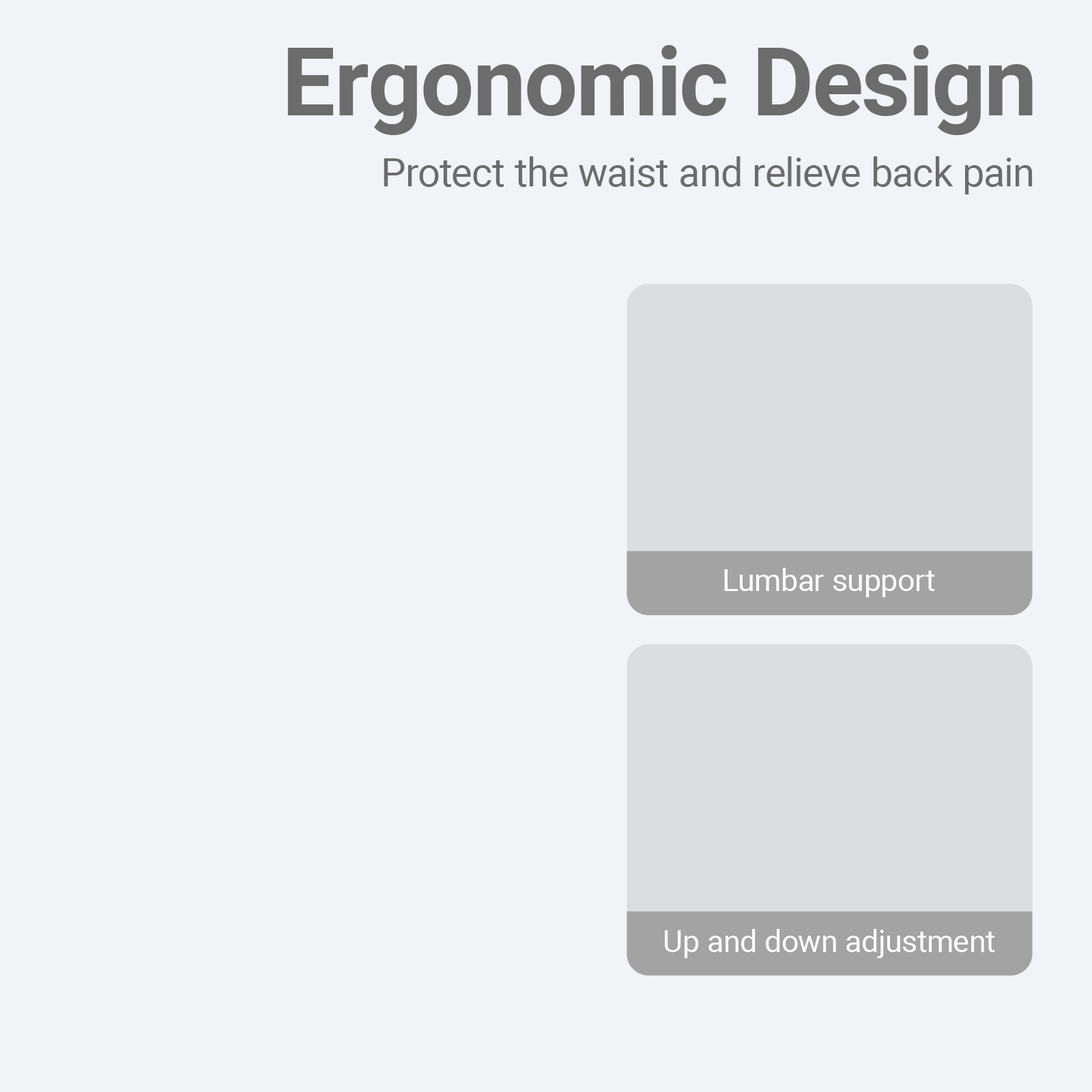
<style>
.page{position:relative;width:1092px;height:1092px;background:#f2f3f6}
.page>*{position:absolute;margin:0}
.t1{font:94.6px "Roboto-Bold";color:#6c6c6c}
.t2{font:39.3px "Roboto-Regular";color:#6c6c6c}
.t3{font:30.6px "Roboto-Regular";color:#ffffff}
.t4{font:30.6px "Roboto-Regular";color:#fefefe}
</style>
<div class="page">
<p class="t1" style="left:287px;top:45px;width:746px;height:90px">Ergonomic Design</p>
<p class="t2" style="left:384px;top:156px;width:649px;height:39px">Protect the waist and relieve back pain</p>
<p class="t3" style="left:724px;top:568px;width:211px;height:29px">Lumbar support</p>
<p class="t4" style="left:665px;top:929px;width:330px;height:29px">Up and down adjustment</p>
</div>
